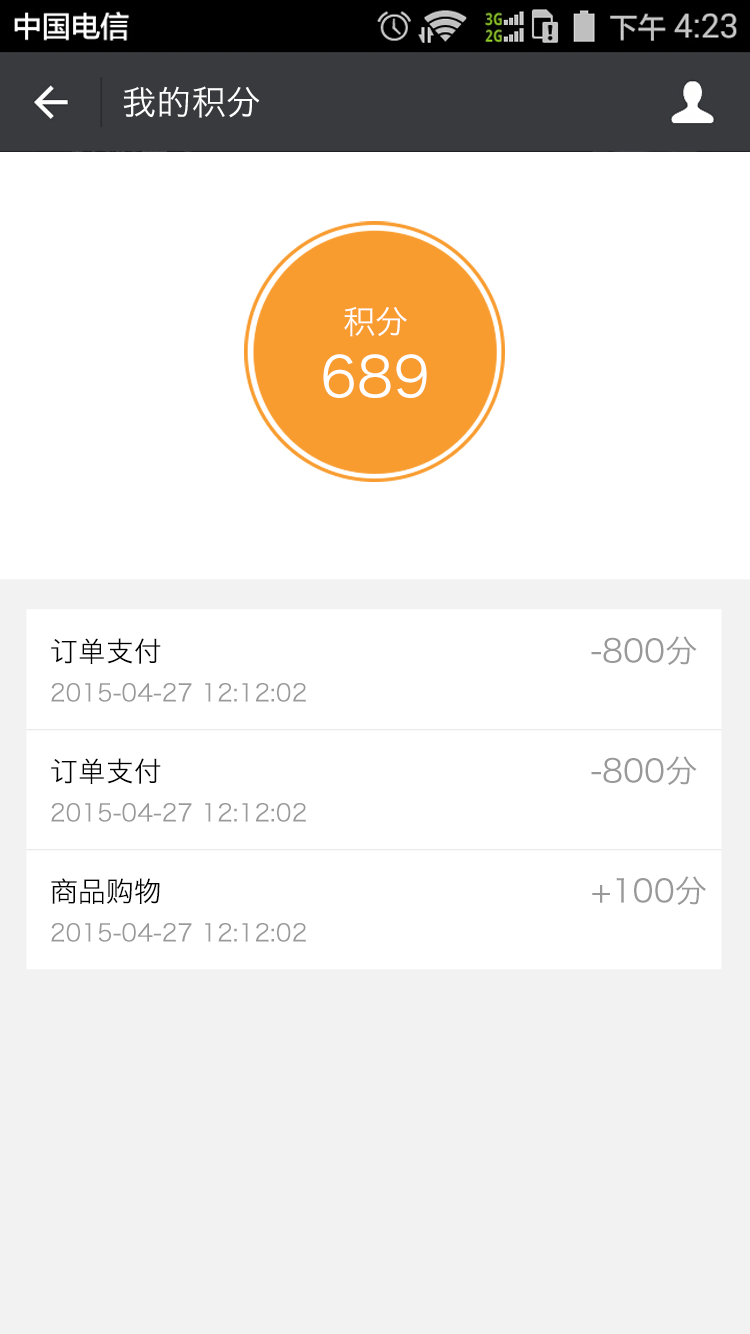
<style>
.page{position:relative;width:750px;height:1334px;background:#ffffff}
.page>*{position:absolute;margin:0}
.t1{font:34px "HiraginoSansGB-W3";letter-spacing:0.022em;color:#ffffff}
.t2{font:32.4px "HiraginoSansGB-W3";color:#ffffff}
.t3{font:55.6px "HiraginoSansGB-W3";color:#ffffff}
.t4{font:28px "HiraginoSansGB-W3";color:#000000}
.t5{font:32px "HiraginoSansGB-W3";color:#999999}
.t6{font:24px "HiraginoSansGB-W3";color:#999999}
</style>
<div class="page">
<p class="t1" style="left:123px;top:86px;width:137px;height:32px">我的积分</p>
<p class="t2" style="left:344px;top:306px;width:63px;height:31px">积分</p>
<p class="t3" style="left:323px;top:354px;width:104px;height:44px">689</p>
<p class="t4" style="left:51px;top:638px;width:110px;height:26px">订单支付</p>
<p class="t5" style="left:591px;top:636px;width:106px;height:29px">-800分</p>
<p class="t6" style="left:51px;top:683px;width:255px;height:19px">2015-04-27 12:12:02</p>
<p class="t4" style="left:51px;top:758px;width:110px;height:26px">订单支付</p>
<p class="t5" style="left:591px;top:756px;width:106px;height:29px">-800分</p>
<p class="t6" style="left:51px;top:803px;width:255px;height:19px">2015-04-27 12:12:02</p>
<p class="t4" style="left:51px;top:878px;width:109px;height:26px">商品购物</p>
<p class="t5" style="left:592px;top:876px;width:114px;height:29px">+100分</p>
<p class="t6" style="left:51px;top:923px;width:255px;height:19px">2015-04-27 12:12:02</p>
</div>
